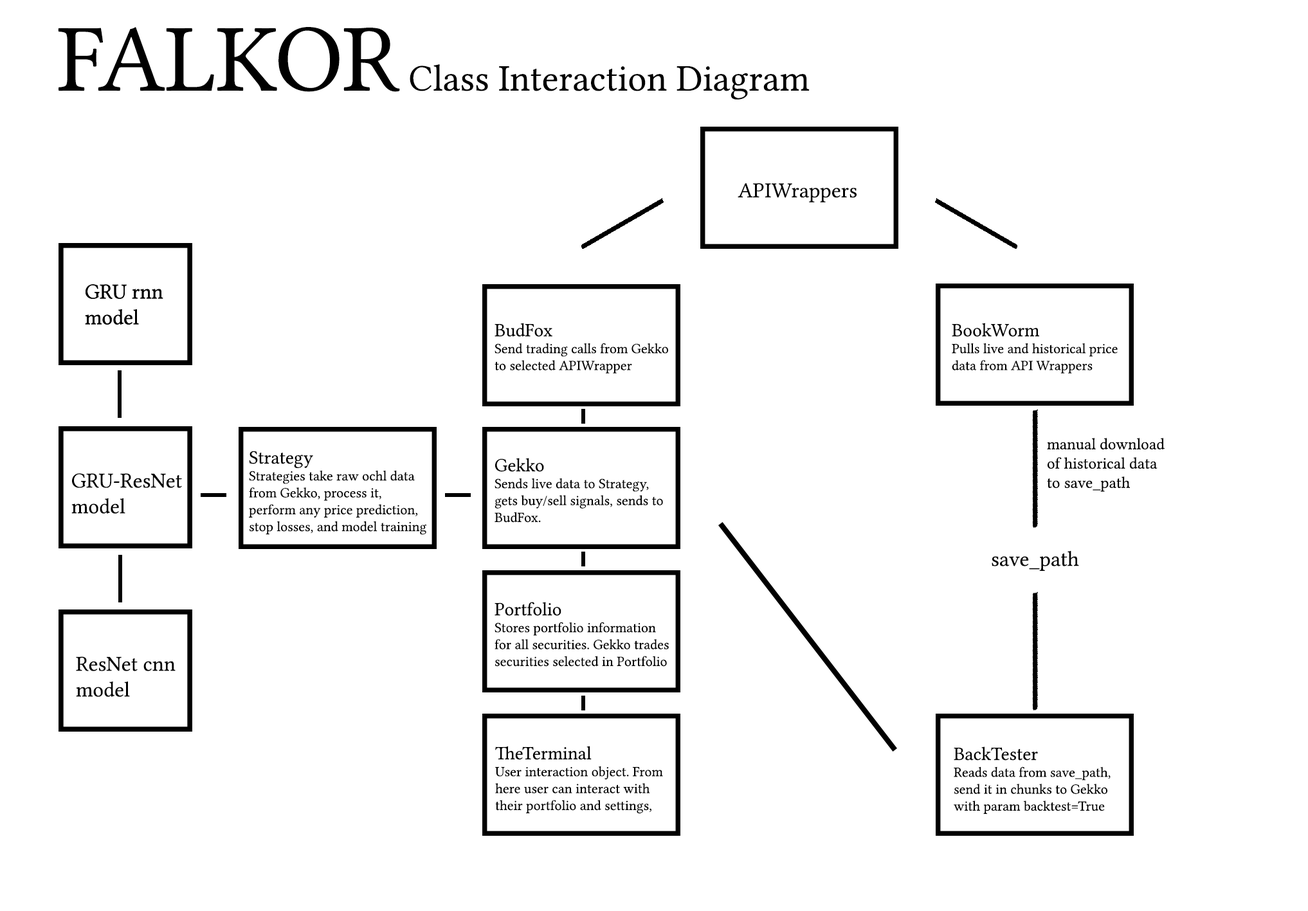
<style>
.page{position:relative;width:1308px;height:911px;background:#ffffff}
.page>*{position:absolute;margin:0}
.t1{font:37.5px "LinLibertine";color:#000000}
.t2{font:96.5px "LinLibertine";color:#000000}
.t3{font:21.4px "LinLibertine";color:#000000}
.t4{font:14.1px "LinLibertine";color:#000000}
.t5{font:18.8px "LinLibertine";color:#000000}
.t6{font:16.1px "LinLibertine";color:#000000}
</style>
<div class="page">
<p class="t1" style="left:58px;top:27px;width:752px;height:73px"><span class="t2">FALKOR</span> Class Interaction Diagram</p>
<p class="t3" style="left:738px;top:183px;width:119px;height:20px">APIWrappers</p>
<p class="t3" style="left:85px;top:284px;width:78px;height:41px">GRU rnn<br>model</p>
<p class="t3" style="left:85px;top:284px;width:78px;height:41px">GRU rnn<br>model</p>
<p class="t4" style="left:495px;top:323px;width:173px;height:51px"><span class="t5">BudFox<br></span>Send trading calls from Gekko<br>to selected APIWrapper</p>
<p class="t4" style="left:952px;top:323px;width:166px;height:51px"><span class="t5">BookWorm<br></span>Pulls live and historical price<br>data from API Wrappers</p>
<p class="t6" style="left:1047px;top:438px;width:118px;height:54px">manual download <br>of historical data <br>to save_path</p>
<p class="t4" style="left:249px;top:451px;width:177px;height:84px"><span class="t5">Strategy<br></span>Strategies take raw ochl data<br>from Gekko, process it, <br>perform any price prediction,<br>stop losses, and model training</p>
<p class="t4" style="left:495px;top:458px;width:168px;height:65px"><span class="t5">Gekko<br></span>Sends live data to Strategy,<br>gets buy/sell signals, sends to<br>BudFox.</p>
<p class="t3" style="left:71px;top:473px;width:111px;height:41px">GRU-ResNet<br>model</p>
<p class="t3" style="left:992px;top:551px;width:87px;height:20px">save_path</p>
<p class="t4" style="left:495px;top:602px;width:174px;height:65px"><span class="t5">Portfolio<br></span>Stores portfolio information <br>for all securities. Gekko trades <br>securities selected in Portfolio</p>
<p class="t3" style="left:76px;top:657px;width:100px;height:40px">ResNet cnn<br>model</p>
<p class="t4" style="left:495px;top:746px;width:168px;height:68px"><span class="t5">TheTerminal<br></span>User interaction object. From<br>here user can interact with<br>their portfolio and settings,</p>
<p class="t4" style="left:954px;top:747px;width:157px;height:67px"><span class="t5">BackTester<br></span>Reads data from save_path,<br>send it in chunks to Gekko<br>with param backtest=True</p>
</div>
